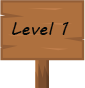
<style>
.page{position:relative;width:85px;height:88px;background:#ae703e}
.page>*{position:absolute;margin:0}
.t1{font:18px "MVBoli";color:#04090a}
</style>
<div class="page">
<p class="t1" style="left:12px;top:22px;width:57px;height:13px">Level 1</p>
</div>
